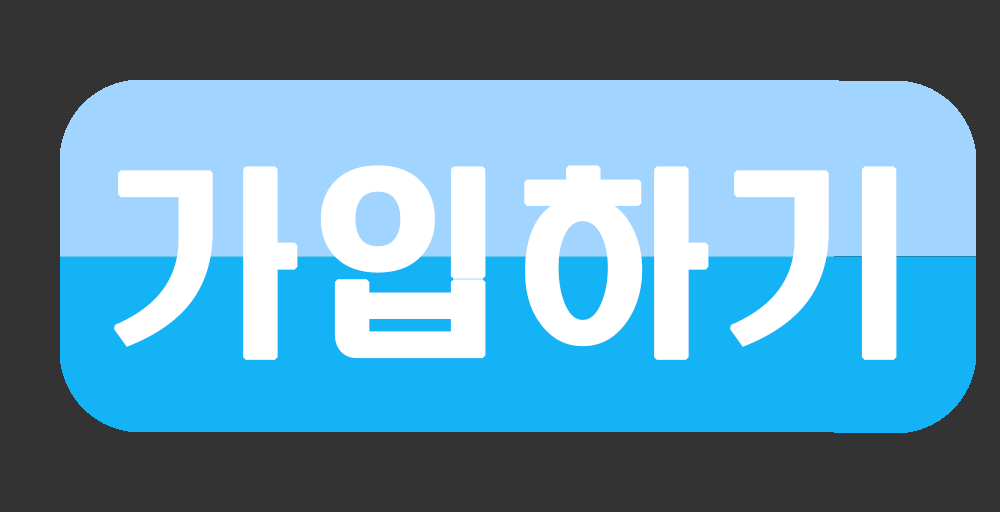
<style>
.page{position:relative;width:1000px;height:512px;background:#333333}
.page>*{position:absolute;margin:0}
.t1{font:200px "H2hdrM";color:#ffffff;font-weight:bold}
</style>
<div class="page">
<p class="t1" style="left:114px;top:165px;width:783px;height:195px">가입하기</p>
</div>
